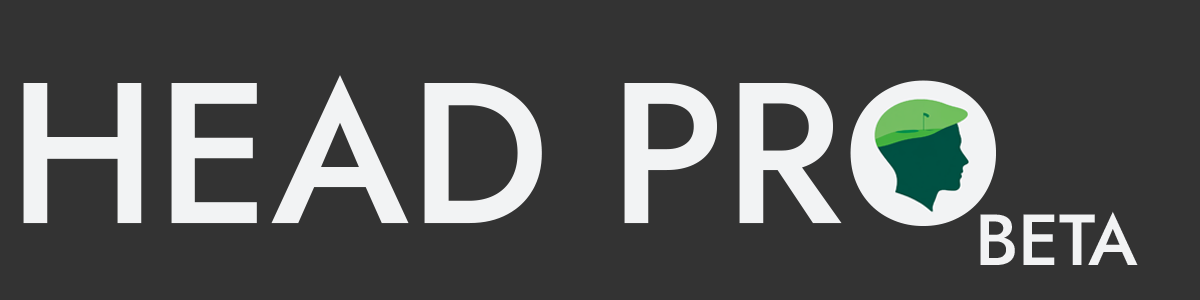
<style>
.page{position:relative;width:1200px;height:300px;background:#333333}
.page>*{position:absolute;margin:0}
.t1{font:200px "JostRoman-Medium";color:#f2f3f4;font-weight:bold}
.t2{font:72px "JostRoman-Medium";color:#f2f3f4;font-weight:bold}
</style>
<div class="page">
<p class="t1" style="left:23px;top:75px;width:973px;height:151px">HEAD PRO</p>
<p class="t2" style="left:980px;top:211px;width:158px;height:54px">BETA</p>
</div>
